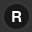
<style>
.page{position:relative;width:32px;height:32px;background:#181818}
.page>*{position:absolute;margin:0}
.t1{font:15.5px "HelveticaNeue-Bold";color:#ffffff;scale:0.96 1}
</style>
<div class="page">
<p class="t1" style="left:12px;top:11px;width:10px;height:11px">R</p>
</div>
